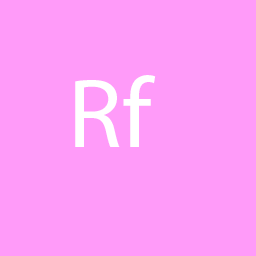
<style>
.page{position:relative;width:256px;height:256px;background:#ff9bf9}
.page>*{position:absolute;margin:0}
.t1{font:100px "MyriadPro-Regular";color:#ffffff}
</style>
<div class="page">
<p class="t1" style="left:75px;top:75px;width:81px;height:72px">Rf</p>
</div>
